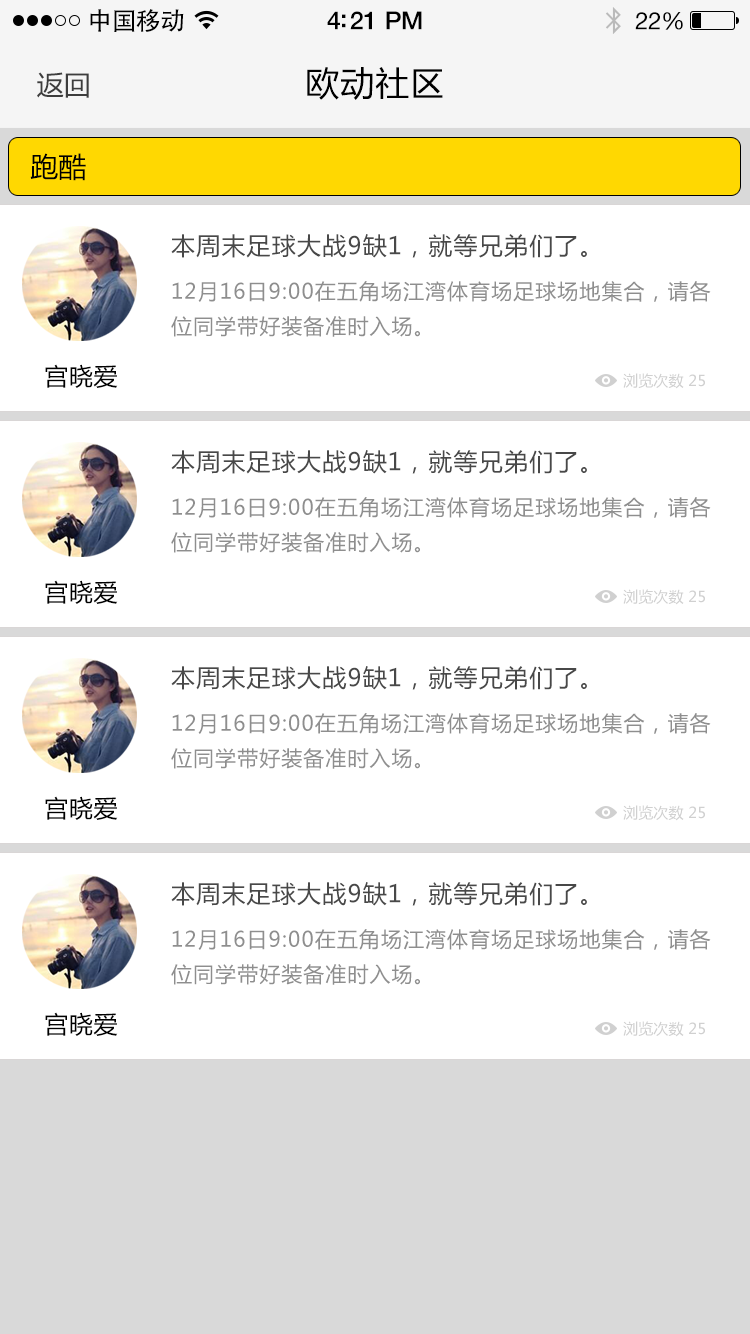
<style>
.page{position:relative;width:750px;height:1334px;background:#ffffff}
.page>*{position:absolute;margin:0}
.t1{font:25px "AdobeHeitiStd-Regular";letter-spacing:-0.025em;color:#000000}
.t2{font:25px "HelveticaNeue-Medium";letter-spacing:-0.02em;color:#000000}
.t3{font:24px "HelveticaNeue";letter-spacing:-0.02em;color:#000000}
.t4{font:27px "MicrosoftYaHei";color:#3d3d3d}
.t5{font:34px "MicrosoftYaHei";letter-spacing:0.03em;color:#000000}
.t6{font:28px "MicrosoftYaHei";color:#000000}
.t7{font:24px "MicrosoftYaHei";letter-spacing:0.05em;color:#555555}
.t8{font:21px/35px "MicrosoftYaHei";letter-spacing:0.05em;color:#8e8e8e}
.t9{font:24px "MicrosoftYaHei";letter-spacing:0.03em;color:#000000}
.t10{font:15px "MicrosoftYaHei";letter-spacing:0.01em;color:#d0d0d0}
</style>
<div class="page">
<p class="t1" style="left:90px;top:9px;width:94px;height:23px">中国移动</p>
<p class="t2" style="left:327px;top:11px;width:95px;height:19px">4:21 PM</p>
<p class="t3" style="left:635px;top:12px;width:48px;height:18px">22%</p>
<p class="t4" style="left:37px;top:72px;width:52px;height:26px">返回</p>
<p class="t5" style="left:307px;top:67px;width:136px;height:33px">欧动社区</p>
<p class="t6" style="left:30px;top:153px;width:56px;height:28px">跑酷</p>
<p class="t7" style="left:171px;top:234px;width:416px;height:24px">本周末足球大战9缺1，就等兄弟们了。</p>
<p class="t8" style="left:171px;top:281px;width:540px;height:56px">12月16日9:00在五角场江湾体育场足球场地集合，请各<br>位同学带好装备准时入场。</p>
<p class="t9" style="left:45px;top:364px;width:73px;height:24px">宫晓爱</p>
<p class="t10" style="left:623px;top:373px;width:82px;height:16px">浏览次数 25</p>
<p class="t7" style="left:171px;top:450px;width:416px;height:24px">本周末足球大战9缺1，就等兄弟们了。</p>
<p class="t8" style="left:171px;top:497px;width:540px;height:56px">12月16日9:00在五角场江湾体育场足球场地集合，请各<br>位同学带好装备准时入场。</p>
<p class="t9" style="left:45px;top:580px;width:73px;height:24px">宫晓爱</p>
<p class="t10" style="left:623px;top:589px;width:82px;height:16px">浏览次数 25</p>
<p class="t7" style="left:171px;top:666px;width:416px;height:24px">本周末足球大战9缺1，就等兄弟们了。</p>
<p class="t8" style="left:171px;top:713px;width:540px;height:56px">12月16日9:00在五角场江湾体育场足球场地集合，请各<br>位同学带好装备准时入场。</p>
<p class="t9" style="left:45px;top:796px;width:73px;height:24px">宫晓爱</p>
<p class="t10" style="left:623px;top:805px;width:82px;height:16px">浏览次数 25</p>
<p class="t7" style="left:171px;top:882px;width:416px;height:24px">本周末足球大战9缺1，就等兄弟们了。</p>
<p class="t8" style="left:171px;top:929px;width:540px;height:56px">12月16日9:00在五角场江湾体育场足球场地集合，请各<br>位同学带好装备准时入场。</p>
<p class="t9" style="left:45px;top:1012px;width:73px;height:24px">宫晓爱</p>
<p class="t10" style="left:623px;top:1021px;width:82px;height:16px">浏览次数 25</p>
</div>
